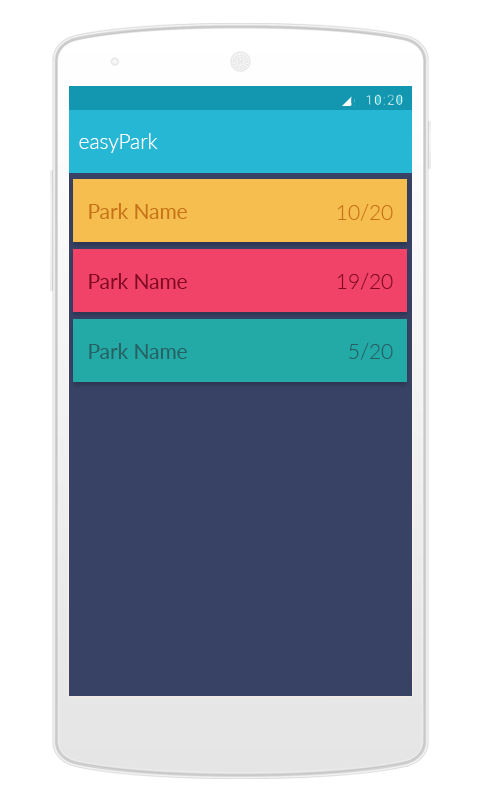
<style>
.page{position:relative;width:480px;height:800px;background:#ffffff}
.page>*{position:absolute;margin:0}
.t1{font:20.8px "Lato-Light";color:#ffffff}
.t2{font:20.8px "Lato-Regular";color:#c87318}
.t3{font:20.8px "Lato-Light";color:#c87318}
.t4{font:20.8px "Lato-Regular";color:#830923}
.t5{font:20.8px "Lato-Light";color:#830923}
.t6{font:20.8px "Lato-Regular";color:#256063}
.t7{font:20.8px "Lato-Light";color:#256063}
</style>
<div class="page">
<p class="t1" style="left:79px;top:133px;width:79px;height:20px">easyPark</p>
<p class="t2" style="left:89px;top:203px;width:98px;height:16px">Park Name</p>
<p class="t3" style="left:337px;top:204px;width:56px;height:17px">10/20</p>
<p class="t4" style="left:89px;top:273px;width:98px;height:16px">Park Name</p>
<p class="t5" style="left:337px;top:273px;width:56px;height:17px">19/20</p>
<p class="t6" style="left:89px;top:343px;width:98px;height:16px">Park Name</p>
<p class="t7" style="left:349px;top:343px;width:44px;height:17px">5/20</p>
</div>
